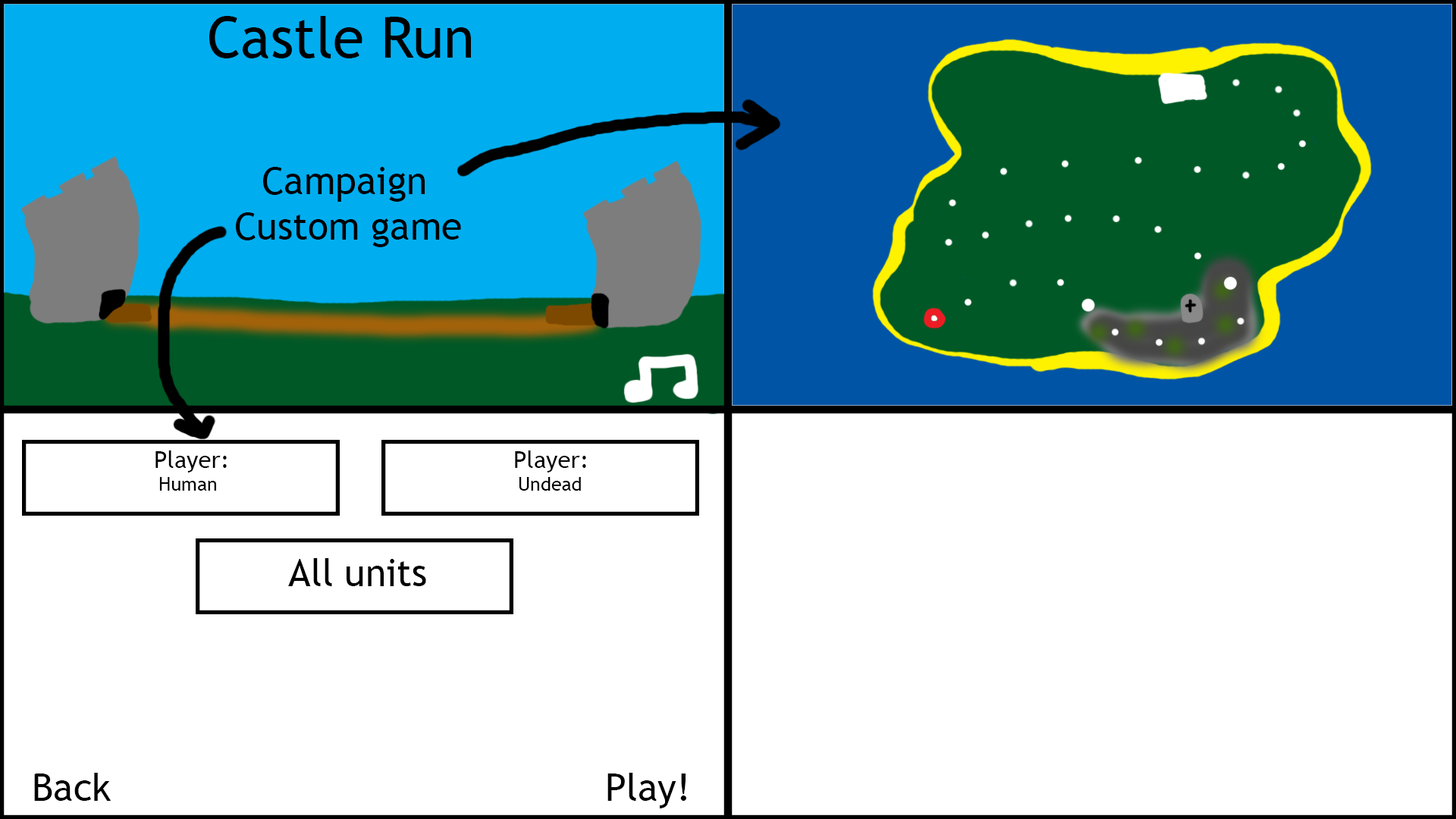
<style>
.page{position:relative;width:1456px;height:819px;background:#ffffff}
.page>*{position:absolute;margin:0}
.t1{font:37.9px "TrebuchetMS";color:#000000}
.t2{font:56.9px "TrebuchetMS";color:#000000}
.t3{font:23.7px "TrebuchetMS";color:#000000}
.t4{font:19px "TrebuchetMS";color:#000000}
</style>
<div class="page">
<p class="t1" style="left:209px;top:16px;width:262px;height:231px"><span class="t2">Castle Run<br></span>   <br><br>  Campaign<br> Custom game</p>
<p class="t3" style="left:155px;top:450px;width:72px;height:41px"><span class="t1">      </span>Player:<br><span class="t4">     Human</span></p>
<p class="t3" style="left:515px;top:450px;width:71px;height:41px"><span class="t1">      </span>Player:<br><span class="t4">     Undead</span></p>
<p class="t1" style="left:288px;top:558px;width:138px;height:28px">All units</p>
<p class="t1" style="left:34px;top:773px;width:652px;height:35px">Back                   Play!</p>
</div>
